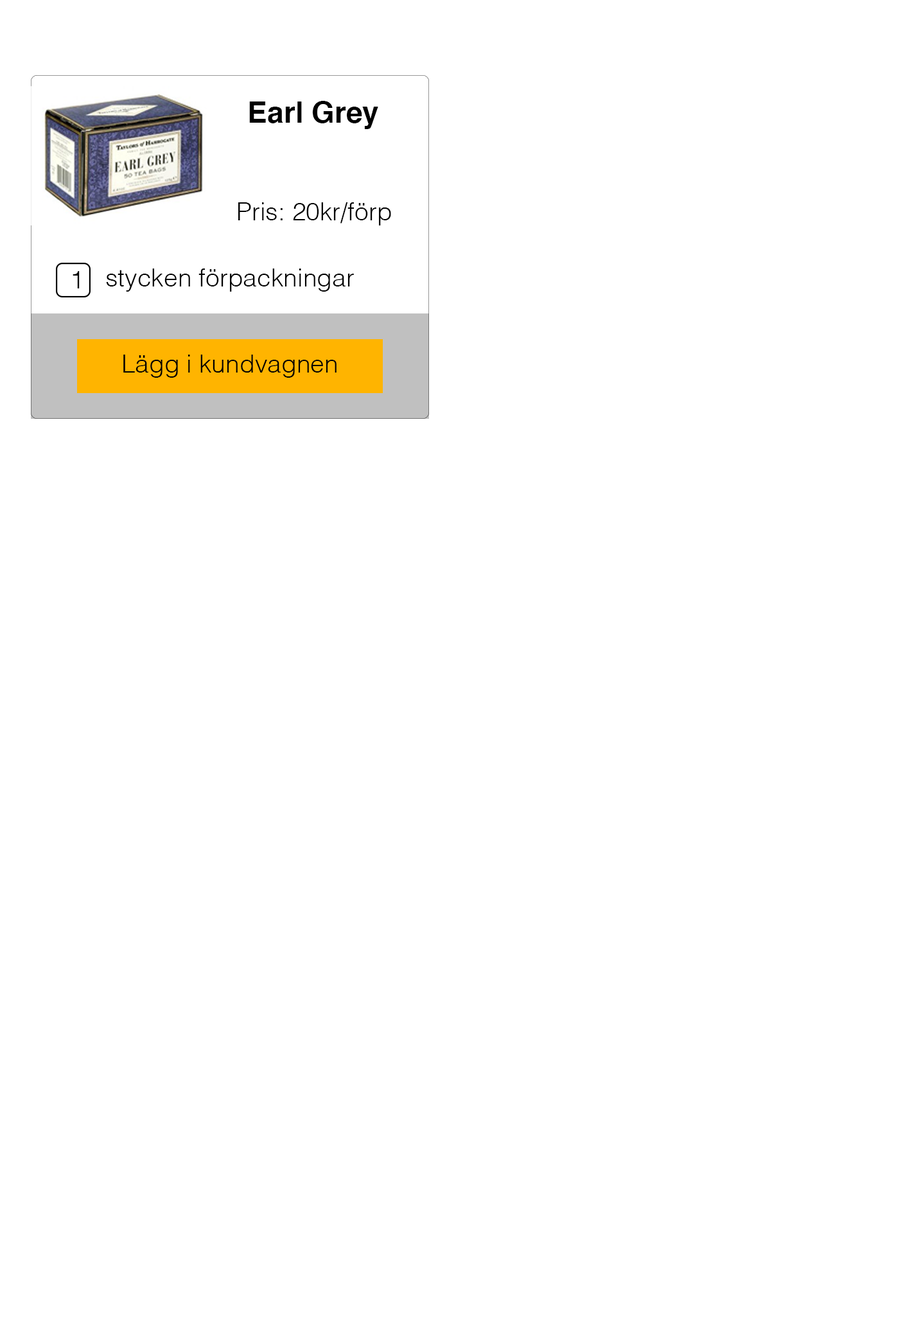
<style>
.page{position:relative;width:903px;height:1320px;background:#ffffff}
.page>*{position:absolute;margin:0}
.t1{font:29.6px "Helvetica-Bold";color:#000000}
.t2{font:25.1px "Helvetica-Light";color:#000000}
</style>
<div class="page">
<p class="t1" style="left:249px;top:101px;width:129px;height:28px">Earl Grey</p>
<p class="t2" style="left:238px;top:202px;width:153px;height:23px">Pris: 20kr/förp</p>
<p class="t2" style="left:106px;top:269px;width:248px;height:23px">stycken förpackningar</p>
<p class="t2" style="left:73px;top:271px;width:7px;height:17px">1</p>
<p class="t2" style="left:123px;top:355px;width:214px;height:23px">Lägg i kundvagnen</p>
</div>
